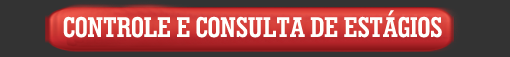
<style>
.page{position:relative;width:510px;height:57px;background:#333333}
.page>*{position:absolute;margin:0}
.t1{font:28.7px "GeometricSlab703BT-BoldCond";color:#fffffc;scale:0.97 1}
</style>
<div class="page">
<p class="t1" style="left:63px;top:10px;width:379px;height:28px">CONTROLE E CONSULTA DE ESTÁGIOS</p>
</div>
